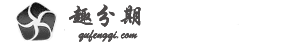
<style>
.page{position:relative;width:297px;height:45px;background:#ffffff}
.page>*{position:absolute;margin:0}
.t1{font:25px "STXingkai";color:#4c4949}
.t2{font:14px "STXingkai";color:#4c4949}
</style>
<div class="page">
<p class="t1" style="left:69px;top:4px;width:72px;height:23px">趣分期</p>
<p class="t1" style="left:69px;top:4px;width:72px;height:23px">趣分期</p>
<p class="t2" style="left:78px;top:29px;width:60px;height:13px">qufengqi.com</p>
<p class="t2" style="left:78px;top:29px;width:60px;height:13px">qufengqi.com</p>
</div>
